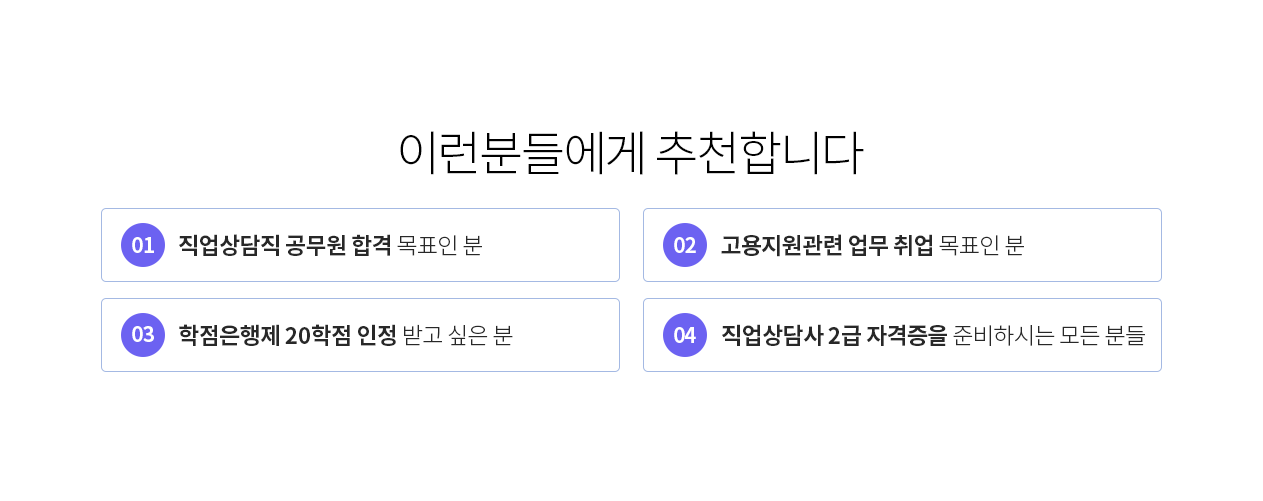
<style>
.page{position:relative;width:1263px;height:501px;background:#ffffff}
.page>*{position:absolute;margin:0}
.t1{font:48px "NotoSansKR-Light";letter-spacing:-0.05em;color:#000000}
.t2{font:21px "NotoSansKR-Bold";letter-spacing:-0.05em;color:#ffffff}
.t3{font:23px "NotoSansKR-Bold";letter-spacing:-0.03em;color:#282828}
.t4{font:23px "NotoSansKR-Light";letter-spacing:-0.03em;color:#282828}
</style>
<div class="page">
<p class="t1" style="left:400px;top:131px;width:464px;height:44px">이런분들에게 추천합니다</p>
<p class="t2" style="left:132px;top:237px;width:22px;height:16px">01</p>
<p class="t3" style="left:179px;top:234px;width:303px;height:22px">직업상담직 공무원 합격 <span class="t4">목표인 분</span></p>
<p class="t2" style="left:674px;top:237px;width:22px;height:16px">02</p>
<p class="t3" style="left:721px;top:234px;width:303px;height:23px">고용지원관련 업무 취업 <span class="t4">목표인 분</span></p>
<p class="t2" style="left:132px;top:326px;width:22px;height:16px">03</p>
<p class="t3" style="left:179px;top:324px;width:334px;height:22px">학점은행제 20학점 인정 <span class="t4">받고 싶은 분</span></p>
<p class="t2" style="left:674px;top:327px;width:22px;height:16px">04</p>
<p class="t3" style="left:722px;top:324px;width:423px;height:22px">직업상담사 2급 자격증을 <span class="t4">준비하시는 모든 분들</span></p>
</div>
